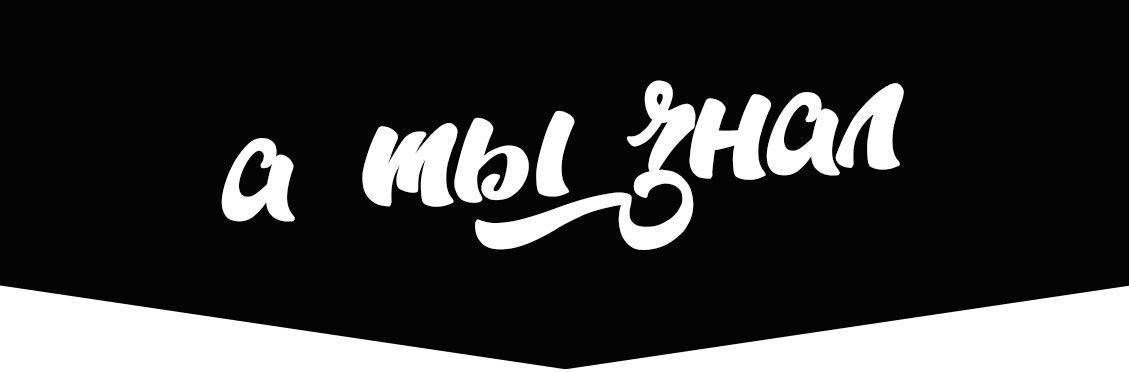
<style>
.page{position:relative;width:1129px;height:372px;background:#030303}
.page>*{position:absolute;margin:0}
.t1{font:170.3px "mr_DopestyleG";color:#ffffff}
</style>
<div class="page">
<p class="t1" style="left:221px;top:80px;width:683px;height:170px;rotate:-5deg">а ты знал</p>
</div>
